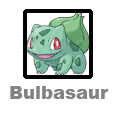
<style>
.page{position:relative;width:117px;height:117px;background:#ffffff}
.page>*{position:absolute;margin:0}
.t1{font:18px "Arial-Black";color:#848282}
</style>
<div class="page">
<p class="t1" style="left:10px;top:86px;width:99px;height:13px">Bulbasaur</p>
</div>
